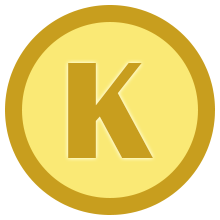
<style>
.page{position:relative;width:220px;height:220px;background:#fae975}
.page>*{position:absolute;margin:0}
.t1{font:143.2px "BritannicBold";color:#c89e1e}
</style>
<div class="page">
<p class="t1" style="left:68px;top:63px;width:85px;height:95px">K</p>
</div>
